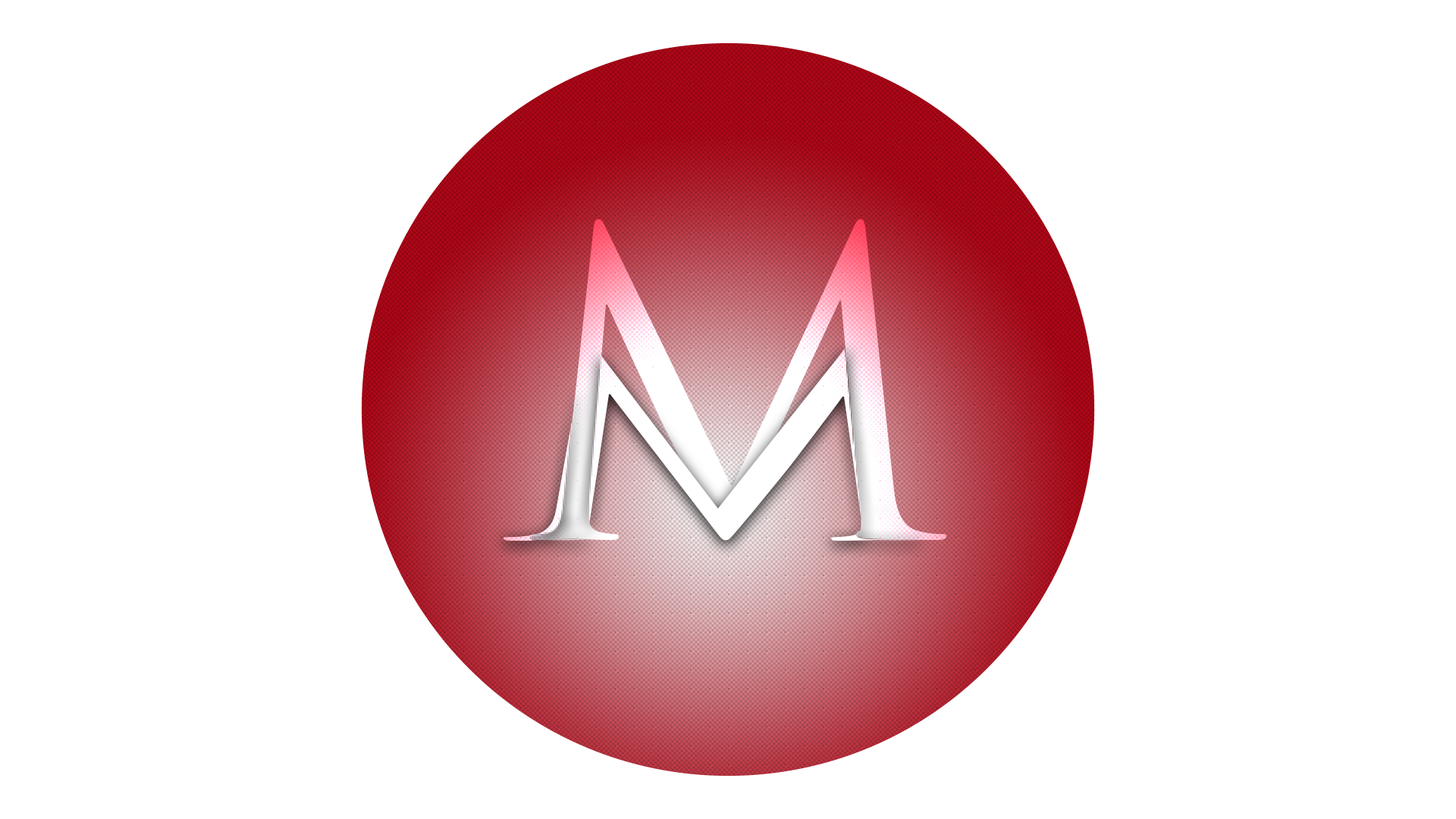
<style>
.page{position:relative;width:1456px;height:819px;background:#ffffff}
.page>*{position:absolute;margin:0}
.t1{font:416.4px "TrajanPro-Regular"}
.t2{font:254.7px "TrajanPro-Regular";color:#ffffff;scale:1.63 1}
</style>
<div class="page">
<p class="t1" style="left:530px;top:219px;width:416px;height:321px">M</p>
<p class="t2" style="left:504px;top:344px;width:416px;height:197px;rotate:180deg">M</p>
</div>
